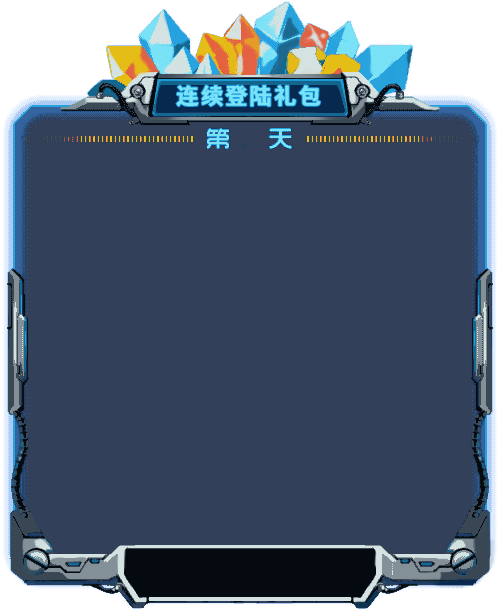
<style>
.page{position:relative;width:500px;height:616px;background:#324059}
.page>*{position:absolute;margin:0}
.t1{font:22.1px "SourceHanSansCN-Bold";letter-spacing:0.08em;color:#7ae2f7;font-weight:bold}
</style>
<div class="page">
<p class="t1" style="left:176px;top:85px;width:145px;height:22px">连续登陆礼包</p>
</div>
